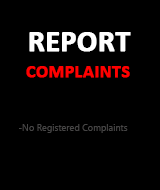
<style>
.page{position:relative;width:160px;height:190px;background:#000000}
.page>*{position:absolute;margin:0}
.t1{font:30px "Calibri-Bold";color:#ffffff;font-weight:bold}
.t2{font:18px "Calibri-Bold";color:#ff0000;font-weight:bold}
.t3{font:9px "MicrosoftNewTaiLue";color:#464545}
</style>
<div class="page">
<p class="t1" style="left:29px;top:32px;width:102px;height:20px">REPORT</p>
<p class="t2" style="left:26px;top:66px;width:104px;height:12px">COMPLAINTS</p>
<p class="t3" style="left:19px;top:124px;width:109px;height:9px">-No Registered Complaints</p>
</div>
